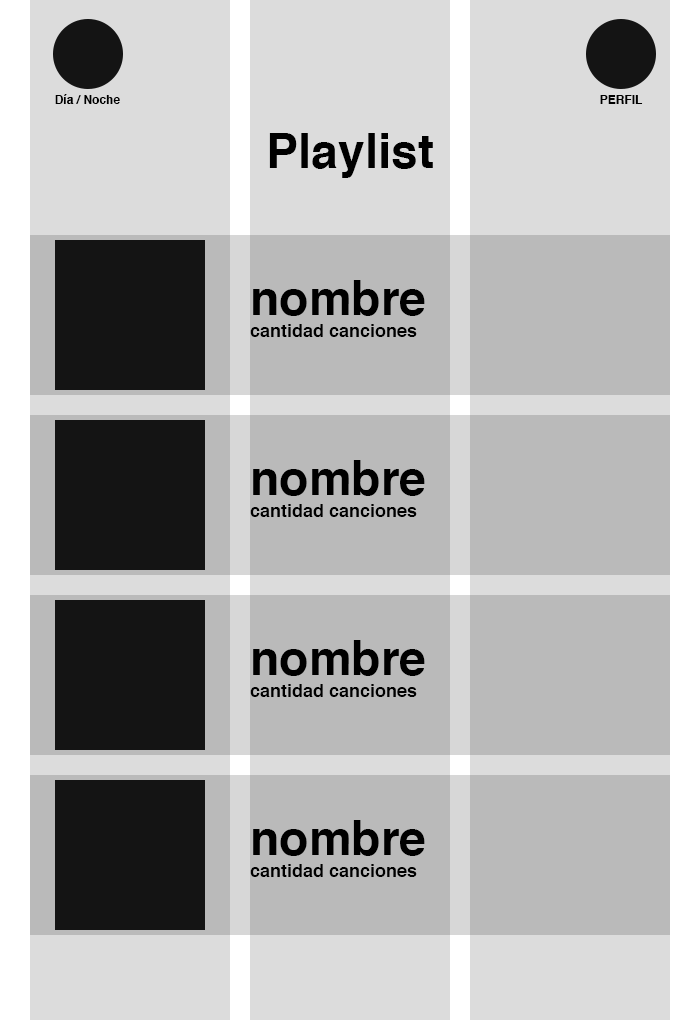
<style>
.page{position:relative;width:700px;height:1020px;background:#bababa}
.page>*{position:absolute;margin:0}
.t1{font:12px "Helvetica-Bold";color:#000000}
.t2{font:48px "Helvetica-Bold";color:#000000}
.t3{font:18px "Helvetica-Bold";color:#000000}
</style>
<div class="page">
<p class="t1" style="left:55px;top:94px;width:65px;height:10px">Día / Noche</p>
<p class="t1" style="left:600px;top:95px;width:43px;height:9px">PERFIL</p>
<p class="t2" style="left:269px;top:133px;width:164px;height:45px">Playlist</p>
<p class="t3" style="left:250px;top:280px;width:175px;height:57px"><span class="t2">nombre<br></span>cantidad canciones</p>
<p class="t3" style="left:250px;top:460px;width:175px;height:57px"><span class="t2">nombre<br></span>cantidad canciones</p>
<p class="t3" style="left:250px;top:640px;width:175px;height:57px"><span class="t2">nombre<br></span>cantidad canciones</p>
<p class="t3" style="left:250px;top:820px;width:175px;height:57px"><span class="t2">nombre<br></span>cantidad canciones</p>
</div>
